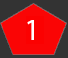
<style>
.page{position:relative;width:68px;height:58px;background:#fa0505}
.page>*{position:absolute;margin:0}
.t1{font:30px "MyriadPro-Regular";color:#ffffff}
</style>
<div class="page">
<p class="t1" style="left:27px;top:20px;width:7px;height:20px">1</p>
</div>
